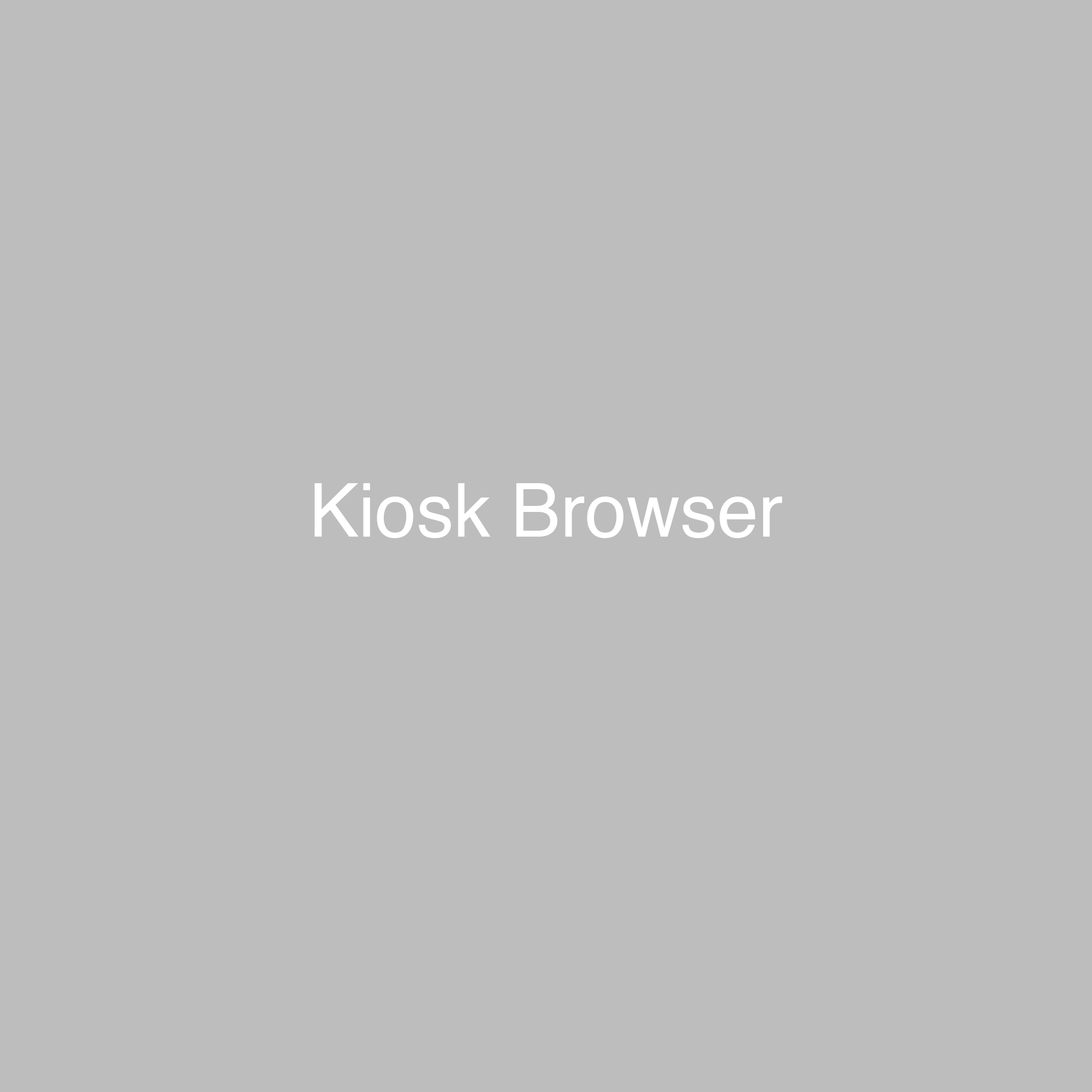
<style>
.page{position:relative;width:1092px;height:1092px;background:#bdbdbd}
.page>*{position:absolute;margin:0}
.t1{font:74.2px "Helvetica";color:#ffffff}
</style>
<div class="page">
<p class="t1" style="left:315px;top:483px;width:467px;height:55px">Kiosk Browser</p>
</div>
